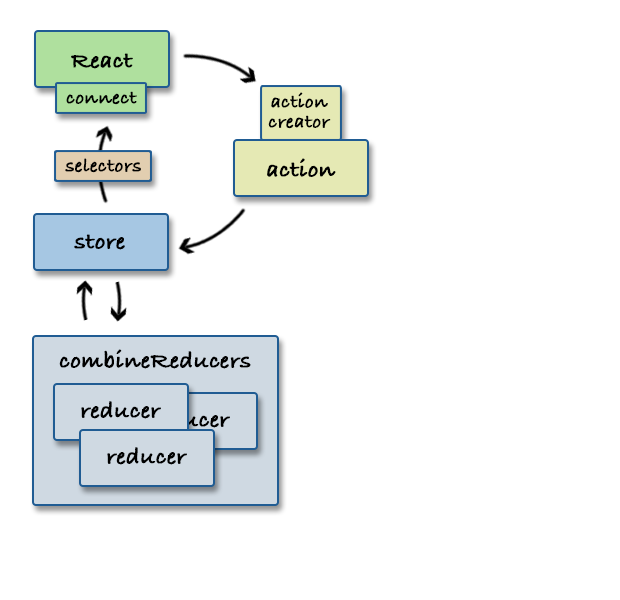
<style>
.page{position:relative;width:620px;height:600px;background:#ffffff}
.page>*{position:absolute;margin:0}
.t1{font:24px "BradleyHandITCTT-Bold";color:#000000;font-weight:bold}
.t2{font:20px "BradleyHandITCTT-Bold";color:#000000;font-weight:bold}
.t3{font:20px/20px "BradleyHandITCTT-Bold";color:#000000;font-weight:bold}
.t4{font:24px "BradleyHandITCTT-Bold";font-weight:bold}
</style>
<div class="page">
<p class="t1" style="left:71px;top:53px;width:62px;height:16px">React</p>
<p class="t2" style="left:66px;top:91px;width:71px;height:14px">connect</p>
<p class="t3" style="left:268px;top:92px;width:63px;height:37px;text-align:center">action<br>creator</p>
<p class="t2" style="left:65px;top:158px;width:76px;height:15px">selectors</p>
<p class="t1" style="left:267px;top:158px;width:69px;height:19px">action</p>
<p class="t1" style="left:74px;top:234px;width:51px;height:16px">store</p>
<p class="t1" style="left:59px;top:349px;width:192px;height:20px">combineReducers</p>
<p class="t1" style="left:81px;top:401px;width:80px;height:18px">reducer</p>
<p class="t4" style="left:150px;top:410px;width:80px;height:18px">reducer</p>
<p class="t1" style="left:107px;top:447px;width:80px;height:18px">reducer</p>
</div>
